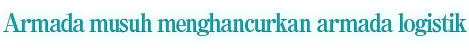
<style>
.page{position:relative;width:469px;height:49px}
.page>*{position:absolute;margin:0}
.t1{font:26px "RyuminPro-ExBold";letter-spacing:-0.08em;color:#139498;scale:0.9 1}
</style>
<div class="page">
<p class="t1" style="left:3px;top:13px;width:464px;height:23px">Armada musuh menghancurkan armada logistik</p>
</div>
